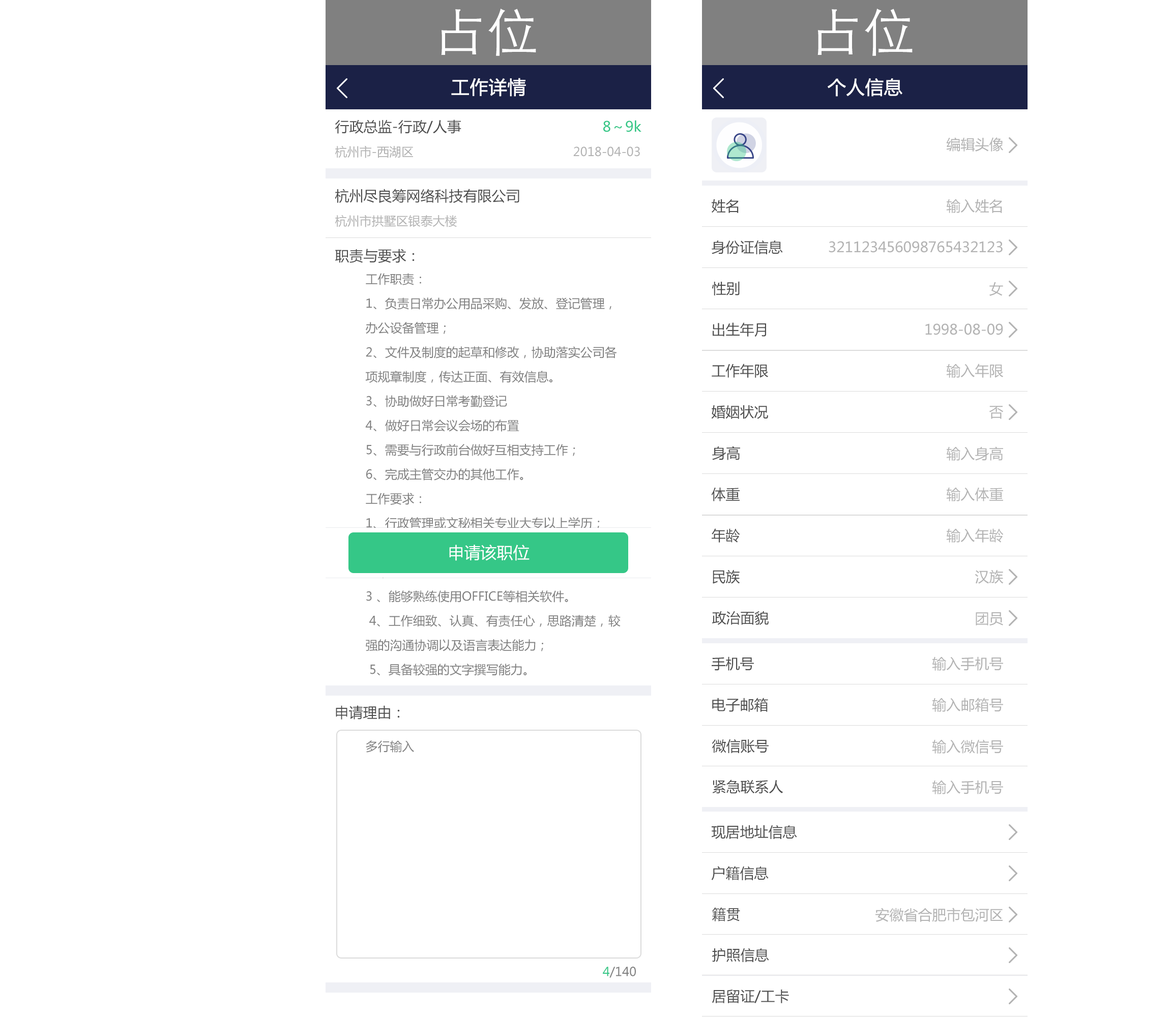
<style>
.page{position:relative;width:1172px;height:1017px;background:#ffffff}
.page>*{position:absolute;margin:0}
.t1{font:50.9px "STHeitiSC-Light";color:#ffffff}
.t2{font:18.3px "MicrosoftYaHei";color:#ffffff;font-weight:bold}
.t3{font:14.2px "MicrosoftYaHei";color:#4d4d4d}
.t4{font:14.2px "MicrosoftYaHei";color:#35c787}
.t5{font:14.2px "MicrosoftYaHei";color:#b3b3b3}
.t6{font:12.2px "MicrosoftYaHei";color:#b3b3b3}
.t7{font:12.2px/24.4px "MicrosoftYaHei";color:#808080}
.t8{font:16.3px "MicrosoftYaHei";color:#ffffff}
.t9{font:12.2px "MicrosoftYaHei";color:#808080}
.t10{font:12.2px "MicrosoftYaHei";color:#35c787}
</style>
<div class="page">
<p class="t1" style="left:441px;top:9px;width:95px;height:47px">占位</p>
<p class="t1" style="left:817px;top:9px;width:96px;height:47px">占位</p>
<p class="t2" style="left:451px;top:78px;width:75px;height:19px">工作详情</p>
<p class="t2" style="left:828px;top:78px;width:74px;height:19px">个人信息</p>
<p class="t3" style="left:335px;top:120px;width:126px;height:14px">行政总监-行政/人事</p>
<p class="t4" style="left:603px;top:120px;width:38px;height:12px">8～9k</p>
<p class="t5" style="left:946px;top:137px;width:57px;height:15px">编辑头像</p>
<p class="t6" style="left:335px;top:145px;width:78px;height:13px">杭州市-西湖区</p>
<p class="t6" style="left:573px;top:147px;width:67px;height:10px">2018-04-03</p>
<p class="t3" style="left:335px;top:189px;width:184px;height:14px">杭州尽良筹网络科技有限公司</p>
<p class="t3" style="left:712px;top:199px;width:27px;height:14px">姓名</p>
<p class="t5" style="left:946px;top:199px;width:56px;height:14px">输入姓名</p>
<p class="t6" style="left:335px;top:215px;width:122px;height:12px">杭州市拱墅区银泰大楼</p>
<p class="t3" style="left:712px;top:240px;width:71px;height:14px">身份证信息</p>
<p class="t5" style="left:829px;top:241px;width:174px;height:12px">321123456098765432123</p>
<p class="t3" style="left:335px;top:249px;width:80px;height:14px">职责与要求：</p>
<p class="t7" style="left:365px;top:273px;width:256px;height:403px">工作职责： <br>1、负责日常办公用品采购、发放、登记管理，办公设备管理； <br>2、文件及制度的起草和修改，协助落实公司各项规章制度，传达正面、有效信息。<br>3、协助做好日常考勤登记 <br>4、做好日常会议会场的布置<br>5、需要与行政前台做好互相支持工作；<br>6、完成主管交办的其他工作。 <br>工作要求： <br>1、行政管理或文秘相关专业大专以上学历；<br>2、1年互联网相关工作经验，两年以上工作经验；<br>3 、能够熟练使用OFFICE等相关软件。<br> 4、工作细致、认真、有责任心，思路清楚，较强的沟通协调以及语言表达能力；<br> 5、具备较强的文字撰写能力。</p>
<p class="t3" style="left:712px;top:281px;width:28px;height:15px">性别</p>
<p class="t5" style="left:989px;top:282px;width:14px;height:14px">女</p>
<p class="t3" style="left:713px;top:323px;width:53px;height:14px">出生年月</p>
<p class="t5" style="left:925px;top:324px;width:78px;height:11px">1998-08-09</p>
<p class="t3" style="left:712px;top:364px;width:57px;height:14px">工作年限</p>
<p class="t5" style="left:946px;top:364px;width:58px;height:14px">输入年限</p>
<p class="t3" style="left:711px;top:405px;width:57px;height:14px">婚姻状况</p>
<p class="t5" style="left:989px;top:406px;width:15px;height:13px">否</p>
<p class="t3" style="left:712px;top:446px;width:28px;height:14px">身高</p>
<p class="t5" style="left:946px;top:447px;width:57px;height:14px">输入身高</p>
<p class="t3" style="left:711px;top:487px;width:29px;height:15px">体重</p>
<p class="t5" style="left:946px;top:487px;width:57px;height:15px">输入体重</p>
<p class="t3" style="left:712px;top:529px;width:28px;height:14px">年龄</p>
<p class="t5" style="left:946px;top:529px;width:58px;height:14px">输入年龄</p>
<p class="t8" style="left:449px;top:545px;width:81px;height:16px">申请该职位</p>
<p class="t3" style="left:713px;top:570px;width:27px;height:14px">民族</p>
<p class="t5" style="left:975px;top:570px;width:29px;height:14px">汉族</p>
<p class="t3" style="left:712px;top:611px;width:57px;height:14px">政治面貌</p>
<p class="t5" style="left:976px;top:612px;width:27px;height:14px">团员</p>
<p class="t3" style="left:712px;top:657px;width:42px;height:14px">手机号</p>
<p class="t5" style="left:932px;top:657px;width:71px;height:14px">输入手机号</p>
<p class="t3" style="left:712px;top:698px;width:56px;height:14px">电子邮箱</p>
<p class="t5" style="left:932px;top:698px;width:71px;height:14px">输入邮箱号</p>
<p class="t3" style="left:336px;top:706px;width:64px;height:14px">申请理由：</p>
<p class="t9" style="left:366px;top:741px;width:48px;height:12px">多行输入</p>
<p class="t3" style="left:712px;top:739px;width:57px;height:14px">微信账号</p>
<p class="t5" style="left:932px;top:740px;width:71px;height:14px">输入微信号</p>
<p class="t3" style="left:712px;top:780px;width:71px;height:14px">紧急联系人</p>
<p class="t5" style="left:932px;top:780px;width:71px;height:15px">输入手机号</p>
<p class="t3" style="left:711px;top:825px;width:86px;height:14px">现居地址信息</p>
<p class="t3" style="left:711px;top:866px;width:58px;height:15px">户籍信息</p>
<p class="t3" style="left:712px;top:908px;width:28px;height:14px">籍贯</p>
<p class="t5" style="left:875px;top:908px;width:128px;height:14px">安徽省合肥市包河区</p>
<p class="t3" style="left:712px;top:948px;width:57px;height:14px">护照信息</p>
<p class="t9" style="left:603px;top:967px;width:33px;height:11px"><span class="t10">4</span>/140</p>
<p class="t3" style="left:712px;top:990px;width:77px;height:14px">居留证/工卡</p>
</div>
